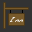
<style>
.page{position:relative;width:32px;height:32px;background:#333333}
.page>*{position:absolute;margin:0}
.t1{font:8.3px "GiffordsHand"}
</style>
<div class="page">
<p class="t1" style="left:10px;top:17px;width:13px;height:5px">Inn</p>
</div>
